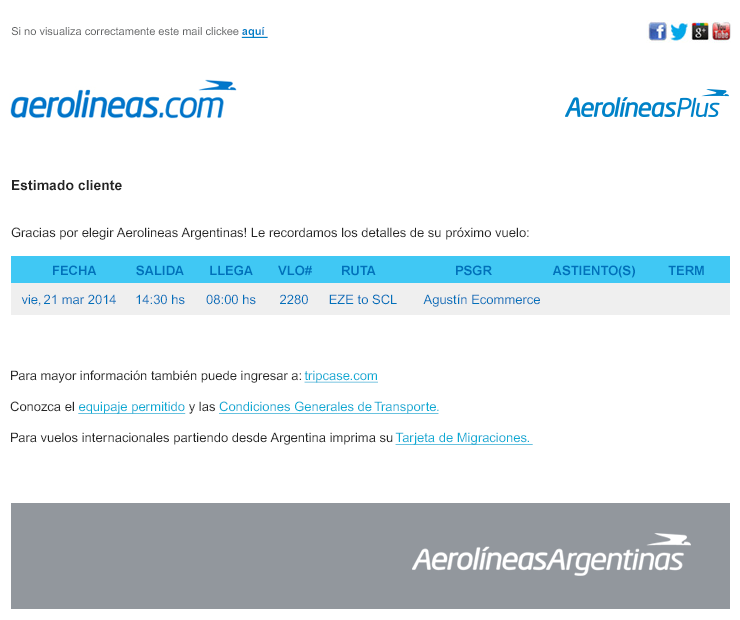
<style>
.page{position:relative;width:740px;height:620px;background:#ffffff}
.page>*{position:absolute;margin:0}
.t1{font:11px "ArialMT";color:#5e6061}
.t2{font:11px "Arial-BoldMT";color:#0082c8;text-decoration:underline}
.t3{font:13px "ArialMT";color:#252525}
.t4{font:14px "Arial-BoldMT";color:#252525}
.t5{font:13px "Arial-BoldMT";color:#0071bb}
.t6{font:13px "ArialMT";color:#0071bb}
.t7{font:13px "ArialMT";color:#08abd4;text-decoration:underline}
</style>
<div class="page">
<p class="t1" style="left:11px;top:27px;width:257px;height:11px">Si no visualiza correctamente este mail clickee <span class="t2">aquí</span></p>
<p class="t3" style="left:11px;top:180px;width:518px;height:60px"><span class="t4">Estimado cliente<br><br><br></span>Gracias por elegir Aerolineas Argentinas! Le recordamos los detalles de su próximo vuelo:</p>
<p class="t5" style="left:53px;top:265px;width:651px;height:13px">FECHA           SALIDA       LLEGA       VLO#        RUTA                      PSGR                 ASTIENTO(S)         TERM</p>
<p class="t6" style="left:21px;top:294px;width:95px;height:12px">vie, 21 mar 2014</p>
<p class="t6" style="left:136px;top:294px;width:49px;height:11px">14:30 hs</p>
<p class="t6" style="left:206px;top:294px;width:50px;height:11px">08:00 hs</p>
<p class="t6" style="left:280px;top:294px;width:28px;height:11px">2280</p>
<p class="t6" style="left:329px;top:294px;width:68px;height:11px">EZE to SCL</p>
<p class="t6" style="left:423px;top:294px;width:117px;height:13px">Agustín Ecommerce</p>
<p class="t3" style="left:10px;top:370px;width:523px;height:75px">Para mayor información también puede ingresar a: <span class="t7">tripcase.com<br><br></span>Conozca el <span class="t7">equipaje permitido </span>y las <span class="t7">Condiciones Generales de Transporte.<br><br></span>Para vuelos internacionales partiendo desde Argentina imprima su <span class="t7">Tarjeta de Migraciones.</span></p>
</div>
